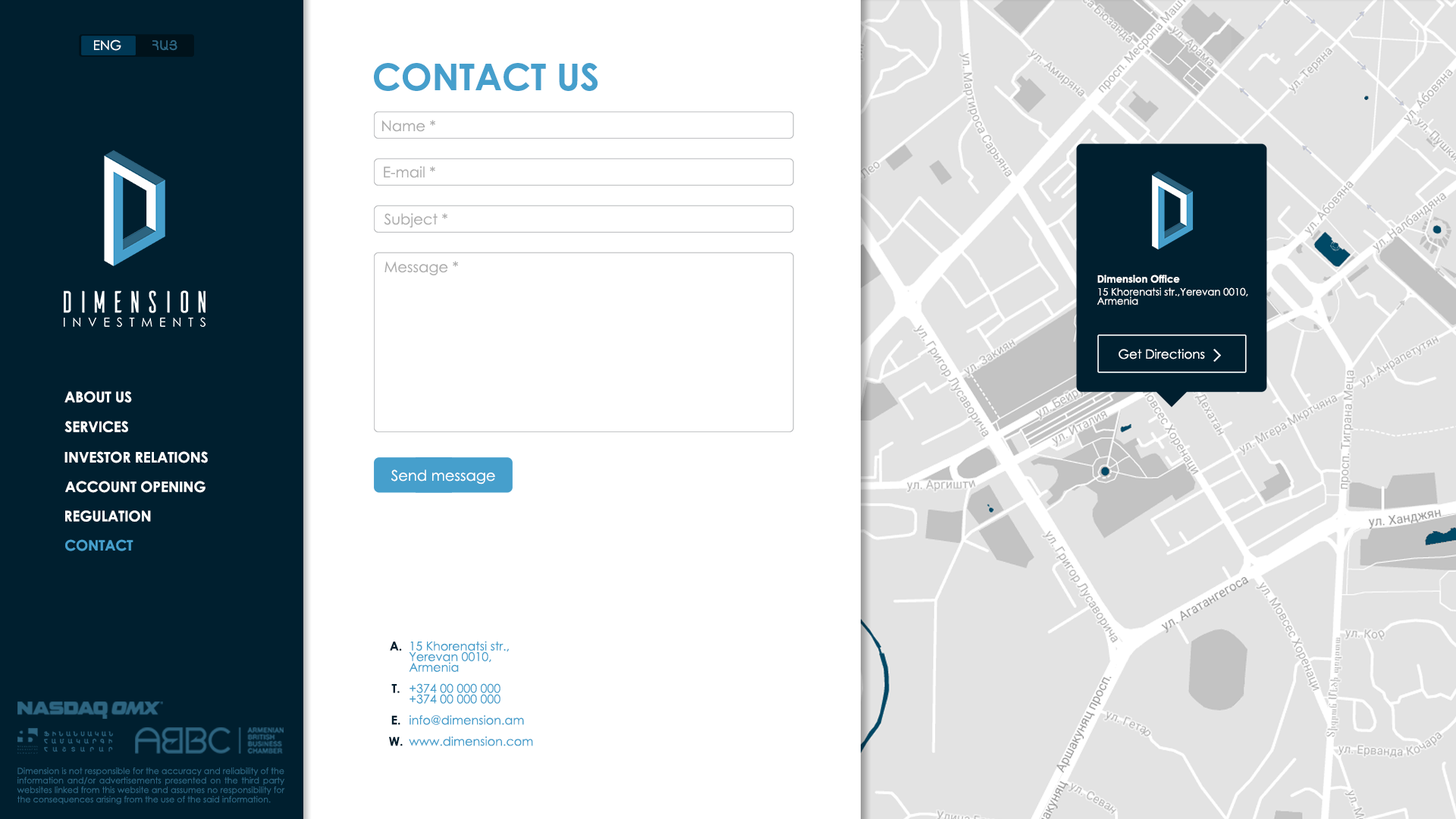
<style>
.page{position:relative;width:1456px;height:819px;background:#ffffff}
.page>*{position:absolute;margin:0}
.t1{font:13.2px "CenturyGothic";color:#ffffff}
.t2{font:13.2px "ArialAMU";color:#2d6480}
.t3{font:36.9px "CenturyGothic-Bold";color:#469fcc}
.t4{font:14.7px "CenturyGothic";color:#aeaeae}
.t5{font:10px "CenturyGothic-Bold";color:#ffffff}
.t6{font:10px/9.2px "CenturyGothic";color:#ffffff}
.t7{font:12.6px "CenturyGothic";color:#ffffff}
.t8{font:14.5px "CenturyGothic-Bold";color:#ffffff}
.t9{font:14.7px "CenturyGothic";color:#ffffff}
.t10{font:14.5px "CenturyGothic-Bold";color:#469fcc}
.t11{font:12.2px/10.6px "CenturyGothic-Bold";color:#001f2f}
.t12{font:12.2px/10.6px "CenturyGothic";color:#469fcc}
.t13{font:8.4px/9.5px "CenturyGothic";color:#2d6480}
</style>
<div class="page">
<p class="t1" style="left:94px;top:39px;width:27px;height:12px">ENG</p>
<p class="t2" style="left:152px;top:40px;width:25px;height:11px">ՀԱՅ</p>
<p class="t3" style="left:374px;top:63px;width:224px;height:28px">CONTACT US</p>
<p class="t4" style="left:382px;top:120px;width:53px;height:12px">Name *</p>
<p class="t4" style="left:384px;top:166px;width:51px;height:12px">E-mail *</p>
<p class="t4" style="left:384px;top:213px;width:63px;height:15px">Subject *</p>
<p class="t4" style="left:384px;top:261px;width:74px;height:15px">Message *</p>
<p class="t5" style="left:1097px;top:275px;width:83px;height:8px">Dimension Office</p>
<p class="t6" style="left:1097px;top:287px;width:151px;height:18px">15 Khorenatsi str.,Yerevan 0010,<br>Armenia</p>
<p class="t7" style="left:1119px;top:349px;width:86px;height:10px">Get Directions</p>
<p class="t8" style="left:64px;top:391px;width:68px;height:12px">ABOUT US</p>
<p class="t8" style="left:64px;top:421px;width:64px;height:11px">SERVICES</p>
<p class="t8" style="left:64px;top:451px;width:144px;height:12px">INVESTOR RELATIONS</p>
<p class="t9" style="left:391px;top:469px;width:104px;height:16px">Send message</p>
<p class="t8" style="left:65px;top:481px;width:141px;height:12px">ACCOUNT OPENING</p>
<p class="t8" style="left:65px;top:510px;width:86px;height:12px">REGULATION</p>
<p class="t10" style="left:65px;top:539px;width:68px;height:12px">CONTACT</p>
<p class="t11" style="left:389px;top:642px;width:14px;height:104px;text-align:center">A.<br><br><br><br>T.<br><br><br>E.<br><br>W.</p>
<p class="t12" style="left:409px;top:641px;width:124px;height:105px">15 Khorenatsi str.,<br>Yerevan 0010,<br>Armenia<br><br>+374 00 000 000<br>+374 00 000 000<br><br>info@dimension.am<br><br>www.dimension.com</p>
<p class="t13" style="left:17px;top:767px;width:268px;height:38px;text-align:justify">Dimension is not responsible for the accuracy and reliability of the information and/or advertisements presented on the third party websites linked from this website and assumes no responsibility for the consequences arising from the use of the said information.</p>
</div>
